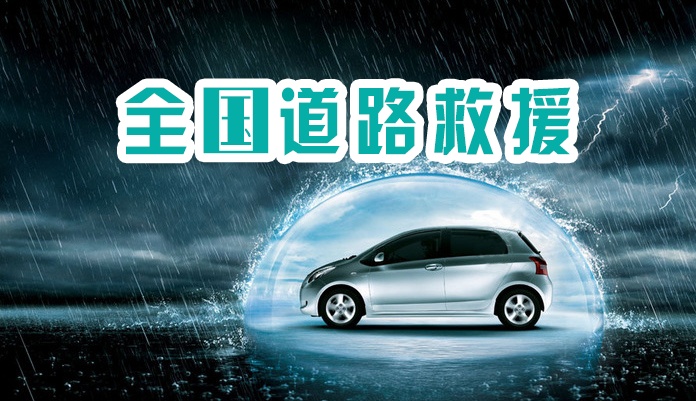
<style>
.page{position:relative;width:696px;height:401px}
.page>*{position:absolute;margin:0}
.t1{font:74px "HYk2gj";letter-spacing:0.18em;color:#05afa7;text-transform:uppercase;scale:0.88 1}
</style>
<div class="page">
<p class="t1" style="left:124px;top:87px;width:447px;height:69px">全国道路救援</p>
</div>
